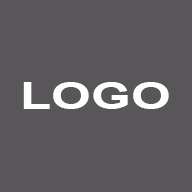
<style>
.page{position:relative;width:192px;height:192px;background:#59565a}
.page>*{position:absolute;margin:0}
.t1{font:38.3px "Arial-BoldMT";color:#ffffff;scale:1.34 1}
</style>
<div class="page">
<p class="t1" style="left:23px;top:82px;width:146px;height:27px">LOGO</p>
</div>
